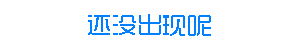
<style>
.page{position:relative;width:300px;height:50px;background:#ffffff}
.page>*{position:absolute;margin:0}
.t1{font:25px "TRENDS";color:#0080ff}
</style>
<div class="page">
<p class="t1" style="left:88px;top:14px;width:123px;height:22px">还没出现呢</p>
</div>
